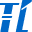
<style>
.page{position:relative;width:32px;height:32px;background:#ffffff}
.page>*{position:absolute;margin:0}
.t1{font:38.7px "Sandoval-Regular";color:#0067c6}
.t2{font:38.6px "Sandoval-Regular";color:#0067c6}
</style>
<div class="page">
<p class="t1" style="left:0px;top:3px;width:20px;height:29px">T</p>
<p class="t2" style="left:15px;top:0px;width:17px;height:32px">i</p>
</div>
